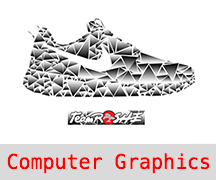
<style>
.page{position:relative;width:216px;height:180px;background:#ffffff}
.page>*{position:absolute;margin:0}
.t1{font:20px "Menlo-Regular";color:#ff0000}
</style>
<div class="page">
<p class="t1" style="left:7px;top:153px;width:203px;height:21px">Computer Graphics</p>
</div>
